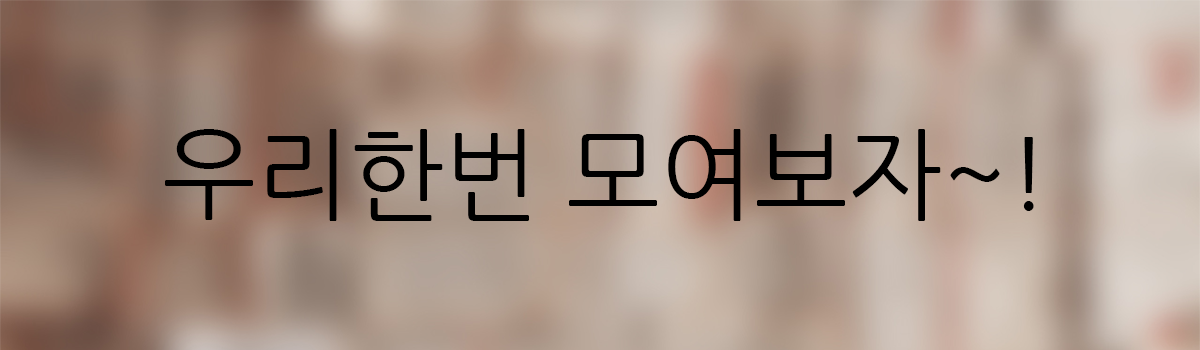
<style>
.page{position:relative;width:1200px;height:350px}
.page>*{position:absolute;margin:0}
.t1{font:100px "NanumGothic";color:#000000}
</style>
<div class="page">
<p class="t1" style="left:165px;top:129px;width:869px;height:92px">우리한번 모여보자~!</p>
</div>
